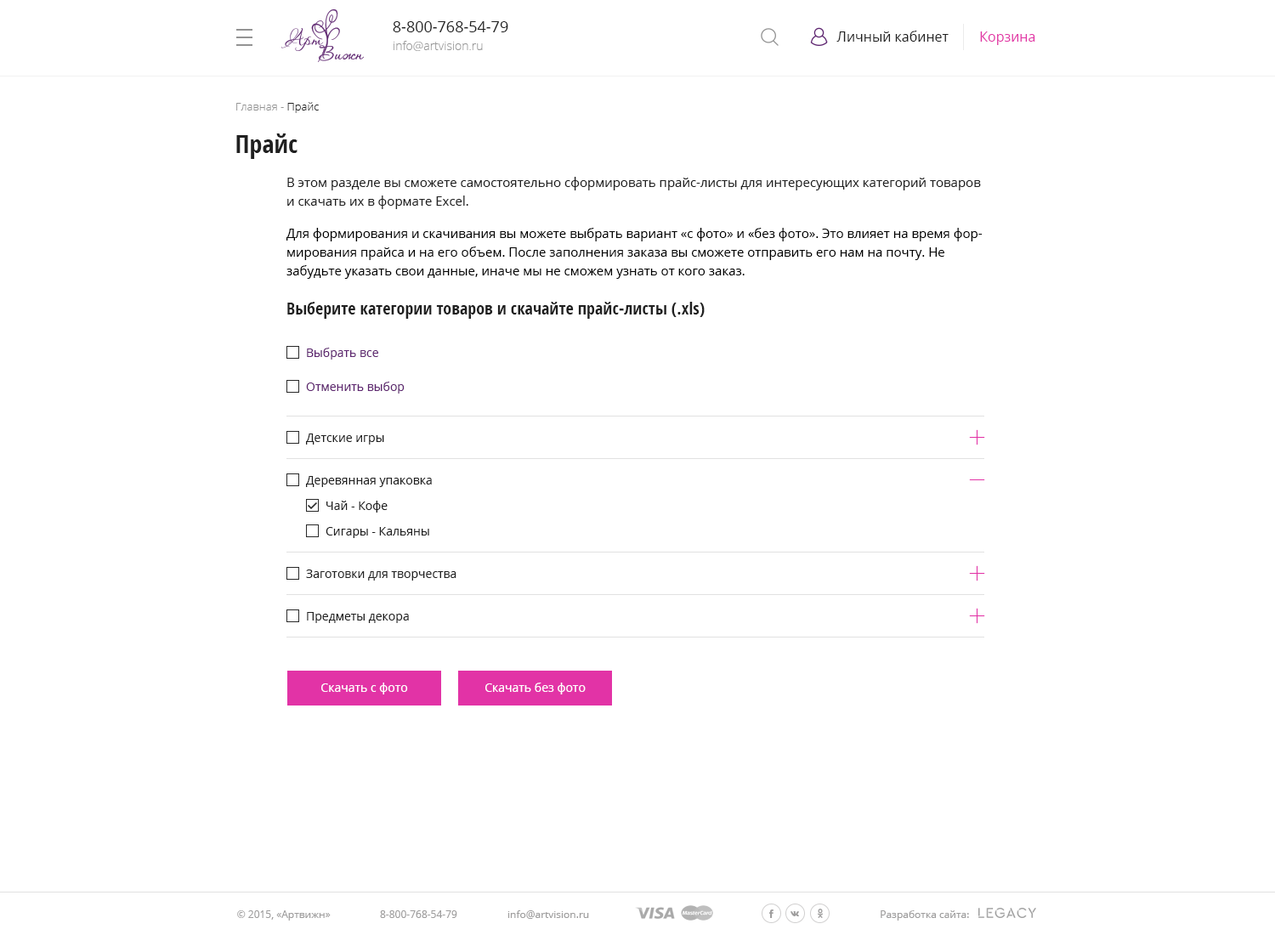
<style>
.page{position:relative;width:1275px;height:935px;background:#ffffff}
.page>*{position:absolute;margin:0}
.t1{font:15.3px "OpenSans";color:#202020}
.t2{font:11.9px "OpenSans-Light";color:#999999}
.t3{font:13.6px "OpenSans";color:#202020}
.t4{font:13.6px "OpenSans";color:#e233a6}
.t5{font:11.1px "OpenSans-Light";color:#939393}
.t6{font:11.1px "OpenSans-Light";color:#202020}
.t7{font:25.5px "OpenSans-CondensedBold";color:#202020}
.t8{font:12.8px/18.7px "OpenSans";color:#202020}
.t9{font:12.8px/18.7px "OpenSans";color:#000000}
.t10{font:17px "OpenSans-CondensedBold";color:#202020}
.t11{font:11.9px "OpenSans";color:#5e2670}
.t12{font:11.9px "OpenSans";color:#202020}
.t13{font:11.9px "OpenSans";color:#ffffff}
.t14{font:10.2px "OpenSans";color:#9e9d9d}
</style>
<div class="page">
<p class="t1" style="left:393px;top:21px;width:115px;height:11px">8-800-768-54-79</p>
<p class="t2" style="left:394px;top:41px;width:89px;height:10px">info@artvision.ru</p>
<p class="t3" style="left:837px;top:31px;width:112px;height:11px">Личный кабинет</p>
<p class="t4" style="left:980px;top:31px;width:55px;height:14px">Корзина</p>
<p class="t5" style="left:236px;top:102px;width:83px;height:11px">Главная - <span class="t6">Прайс</span></p>
<p class="t7" style="left:236px;top:133px;width:62px;height:26px">Прайс</p>
<p class="t8" style="left:287px;top:177px;width:694px;height:32px">В этом разделе вы сможете самостоятельно сформировать прайс-листы для интересующих категорий товаров и скачать их в формате Excel.</p>
<p class="t9" style="left:286px;top:228px;width:697px;height:51px">Для формирования и скачивания вы можете выбрать вариант «с фото» и «без фото». Это влияет на время формирования прайса и на его объем. После заполнения заказа вы сможете отправить его нам на почту. Не забудьте указать свои данные, иначе мы не сможем узнать от кого заказ.</p>
<p class="t10" style="left:287px;top:302px;width:418px;height:17px">Выберите категории товаров и скачайте прайс-листы (.xls)</p>
<p class="t11" style="left:307px;top:348px;width:71px;height:12px">Выбрать все</p>
<p class="t11" style="left:306px;top:382px;width:99px;height:12px">Отменить выбор</p>
<p class="t12" style="left:306px;top:434px;width:78px;height:11px">Детские игры</p>
<p class="t12" style="left:306px;top:476px;width:126px;height:11px">Деревянная упаковка</p>
<p class="t12" style="left:326px;top:501px;width:62px;height:12px">Чай - Кофе</p>
<p class="t12" style="left:326px;top:527px;width:103px;height:11px">Сигары - Кальяны</p>
<p class="t12" style="left:306px;top:570px;width:151px;height:11px">Заготовки для творчества</p>
<p class="t12" style="left:307px;top:612px;width:102px;height:11px">Предметы декора</p>
<p class="t13" style="left:321px;top:683px;width:87px;height:12px">Скачать с фото</p>
<p class="t13" style="left:485px;top:683px;width:101px;height:12px">Скачать без фото</p>
<p class="t14" style="left:237px;top:910px;width:94px;height:11px">© 2015, «Артвижн»</p>
<p class="t14" style="left:380px;top:910px;width:77px;height:8px">8-800-768-54-79</p>
<p class="t14" style="left:508px;top:910px;width:81px;height:9px">info@artvision.ru</p>
<p class="t14" style="left:881px;top:910px;width:88px;height:11px">Разработка сайта:</p>
</div>
